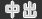
<style>
.page{position:relative;width:42px;height:19px;background:#333333}
.page>*{position:absolute;margin:0}
.t1{font:20px "¢è?";color:#cacaca}
</style>
<div class="page">
<p class="t1" style="left:6px;top:1px;width:30px;height:17px">中出</p>
</div>
